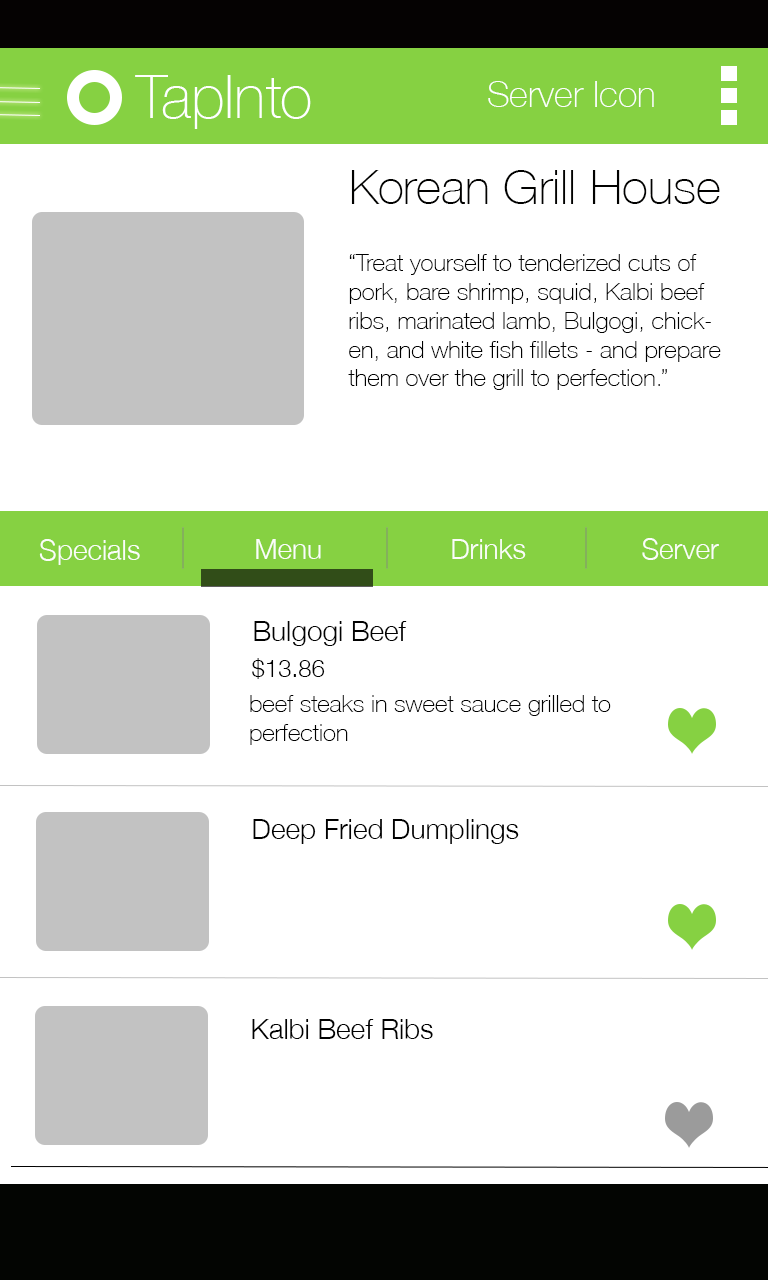
<style>
.page{position:relative;width:768px;height:1280px;background:#ffffff}
.page>*{position:absolute;margin:0}
.t1{font:60px "HelveticaNeue-Thin";color:#ffffff}
.t2{font:36px "HelveticaNeue-Thin";color:#fdfefd}
.t3{font:48px "HelveticaNeue-Thin";color:#010100}
.t4{font:24px "HelveticaNeue-Thin";color:#000000}
.t5{font:28px "HelveticaNeue-Light";color:#fbfdf9}
.t6{font:28px "HelveticaNeue-Light";color:#010101}
.t7{font:24px "HelveticaNeue-Light";color:#000000}
.t8{font:28px "HelveticaNeue-Light";color:#000000}
</style>
<div class="page">
<p class="t1" style="left:135px;top:75px;width:176px;height:54px">TapInto</p>
<p class="t2" style="left:488px;top:81px;width:166px;height:26px">Server Icon</p>
<p class="t3" style="left:351px;top:170px;width:369px;height:34px">Korean Grill House</p>
<p class="t4" style="left:348px;top:254px;width:373px;height:136px">“Treat yourself to tenderized cuts of pork, bare shrimp, squid, Kalbi beef ribs, marinated lamb, Bulgogi, chicken, and white fish fillets - and prepare them over the grill to perfection.”</p>
<p class="t5" style="left:39px;top:539px;width:101px;height:26px">Specials</p>
<p class="t5" style="left:256px;top:539px;width:65px;height:20px">Menu</p>
<p class="t5" style="left:452px;top:539px;width:74px;height:20px">Drinks</p>
<p class="t5" style="left:642px;top:538px;width:77px;height:22px">Server</p>
<p class="t6" style="left:254px;top:621px;width:153px;height:25px">Bulgogi Beef</p>
<p class="t7" style="left:252px;top:658px;width:73px;height:21px">$13.86</p>
<p class="t4" style="left:250px;top:695px;width:361px;height:50px">beef steaks in sweet sauce grilled to perfection</p>
<p class="t8" style="left:253px;top:819px;width:266px;height:25px">Deep Fried Dumplings</p>
<p class="t8" style="left:252px;top:1019px;width:181px;height:20px">Kalbi Beef Ribs</p>
</div>
